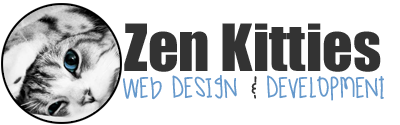
<style>
.page{position:relative;width:400px;height:125px;background:#ffffff}
.page>*{position:absolute;margin:0}
.t1{font:60px "Impact";color:#333333}
.t2{font:29px "TokyoLights";color:#6699cc}
.t3{font:29px "TokyoLights";color:#333333}
</style>
<div class="page">
<p class="t1" style="left:124px;top:23px;width:257px;height:49px">Zen Kitties</p>
<p class="t2" style="left:123px;top:75px;width:261px;height:26px">Web Design<span class="t3"> &amp; </span>Development</p>
</div>
